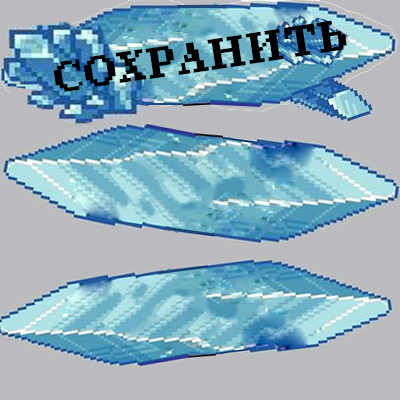
<style>
.page{position:relative;width:400px;height:400px;background:#bbbbbf}
.page>*{position:absolute;margin:0}
.t1{font:38px "PixelTimesBold";color:#000000}
</style>
<div class="page">
<p class="t1" style="left:53px;top:20px;width:294px;height:72px;rotate:-9deg">СОХРАНИТЬ</p>
</div>
